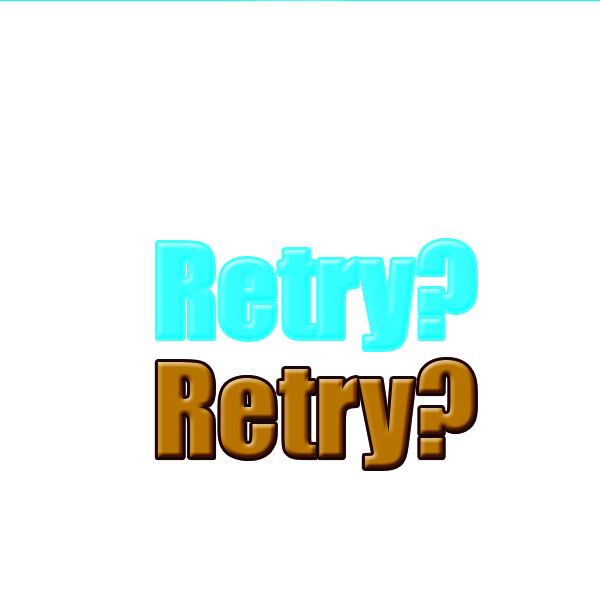
<style>
.page{position:relative;width:600px;height:600px;background:#ffffff}
.page>*{position:absolute;margin:0}
.t1{font:120px "Impact";color:#35ffff}
</style>
<div class="page">
<p class="t1" style="left:157px;top:240px;width:318px;height:108px">Retry?</p>
</div>
